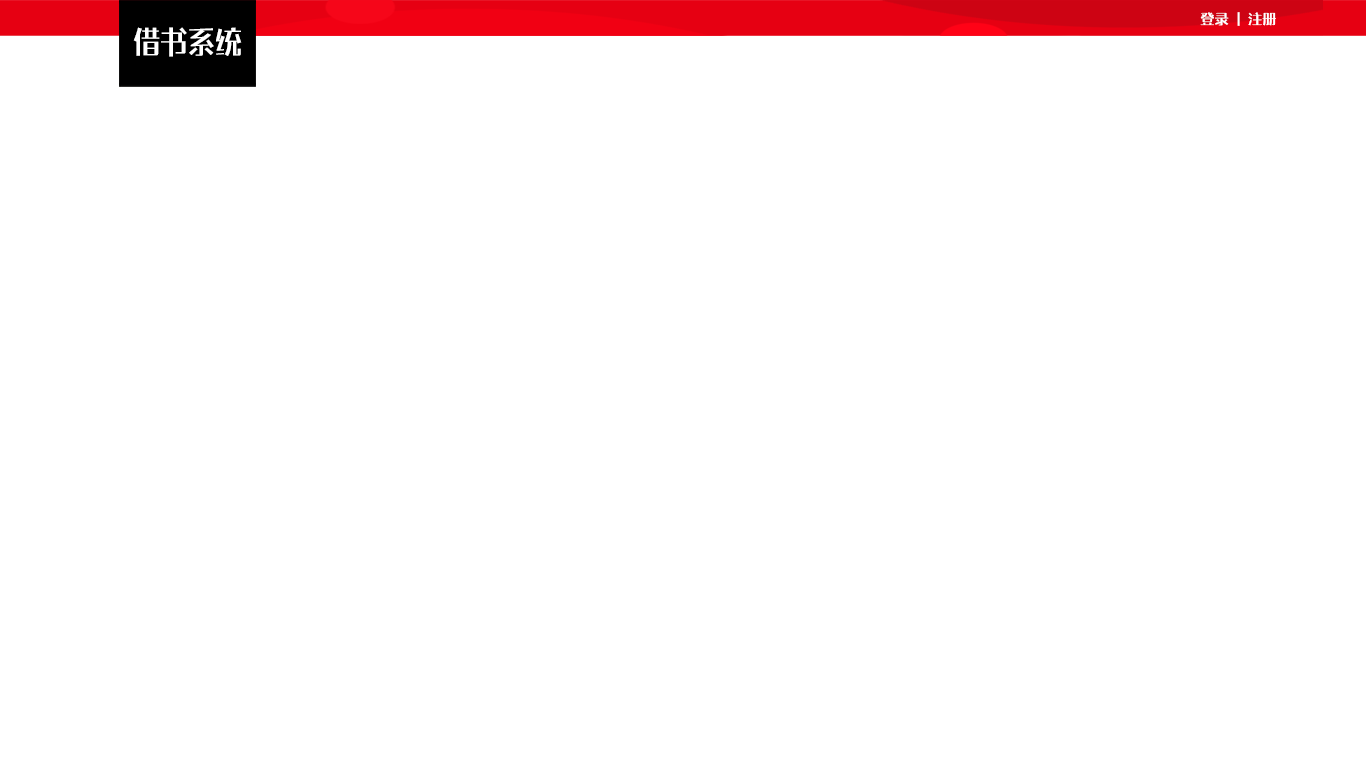
<style>
.page{position:relative;width:1366px;height:768px;background:#ffffff}
.page>*{position:absolute;margin:0}
.t1{font:14px "Benmo-Chenhei";color:#ffffff}
.t2{font:31px "Benmo-Chenhei";color:#ffffff;scale:0.88 1}
</style>
<div class="page">
<p class="t1" style="left:1200px;top:12px;width:76px;height:14px">登录  |  注册</p>
<p class="t2" style="left:133px;top:27px;width:109px;height:30px">借书系统</p>
</div>
